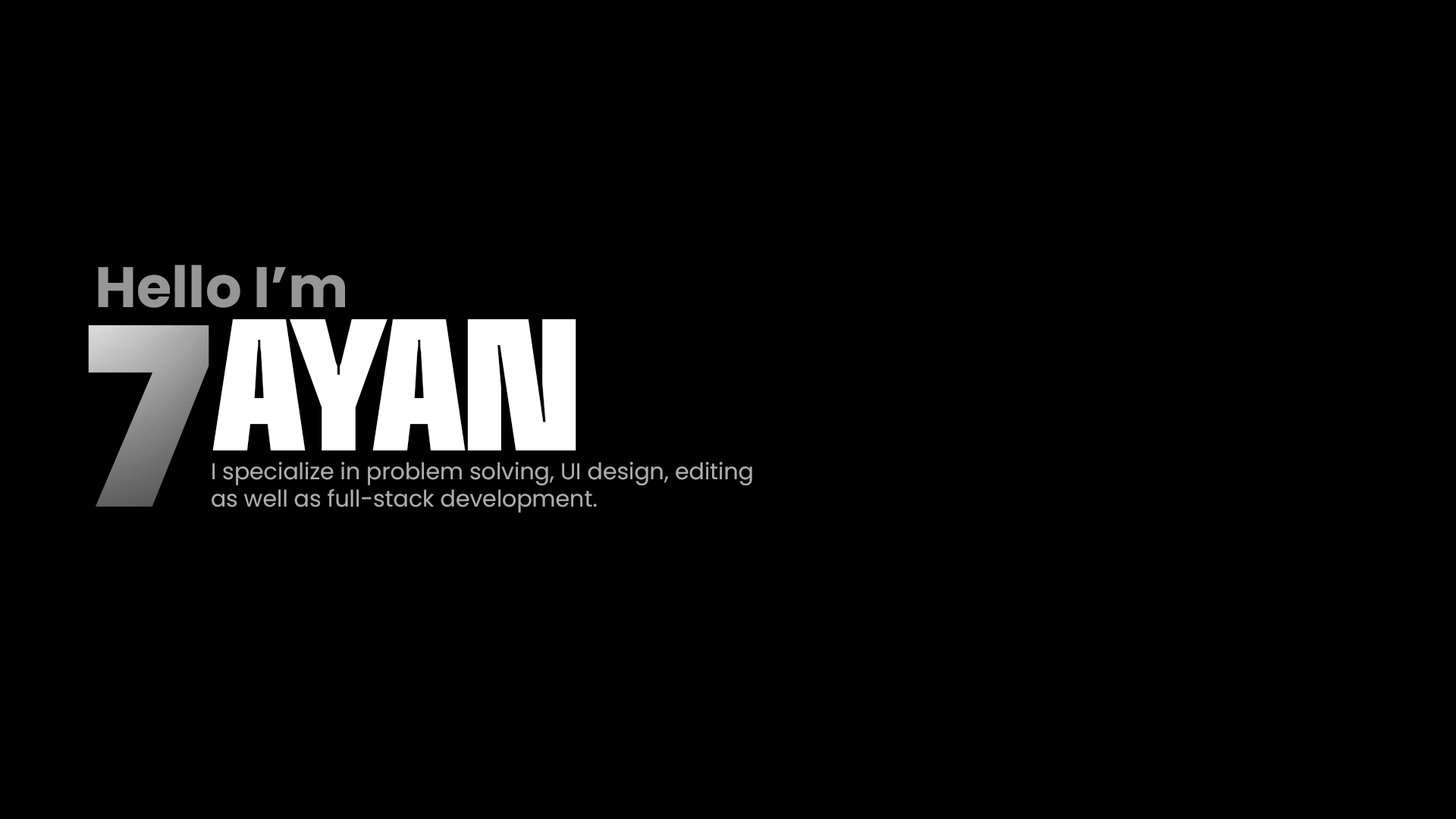
<style>
.page{position:relative;width:1456px;height:819px;background:#000000}
.page>*{position:absolute;margin:0}
.t1{font:56.9px "Poppins-Bold";color:#969696}
.t2{font:248px "Poppins-Black"}
.t3{font:166.9px "BaseNeueTrial-CondensedBlack";color:#ffffff}
.t4{font:22.7px "Poppins-Regular";color:#adadad}
</style>
<div class="page">
<p class="t1" style="left:98px;top:265px;width:247px;height:43px">Hello I’m</p>
<p class="t2" style="left:88px;top:325px;width:121px;height:182px">7</p>
<p class="t3" style="left:212px;top:319px;width:364px;height:131px">AYAN</p>
<p class="t4" style="left:212px;top:462px;width:540px;height:51px">I specialize in problem solving, UI design, editing<br>as well as full-stack development.</p>
</div>
